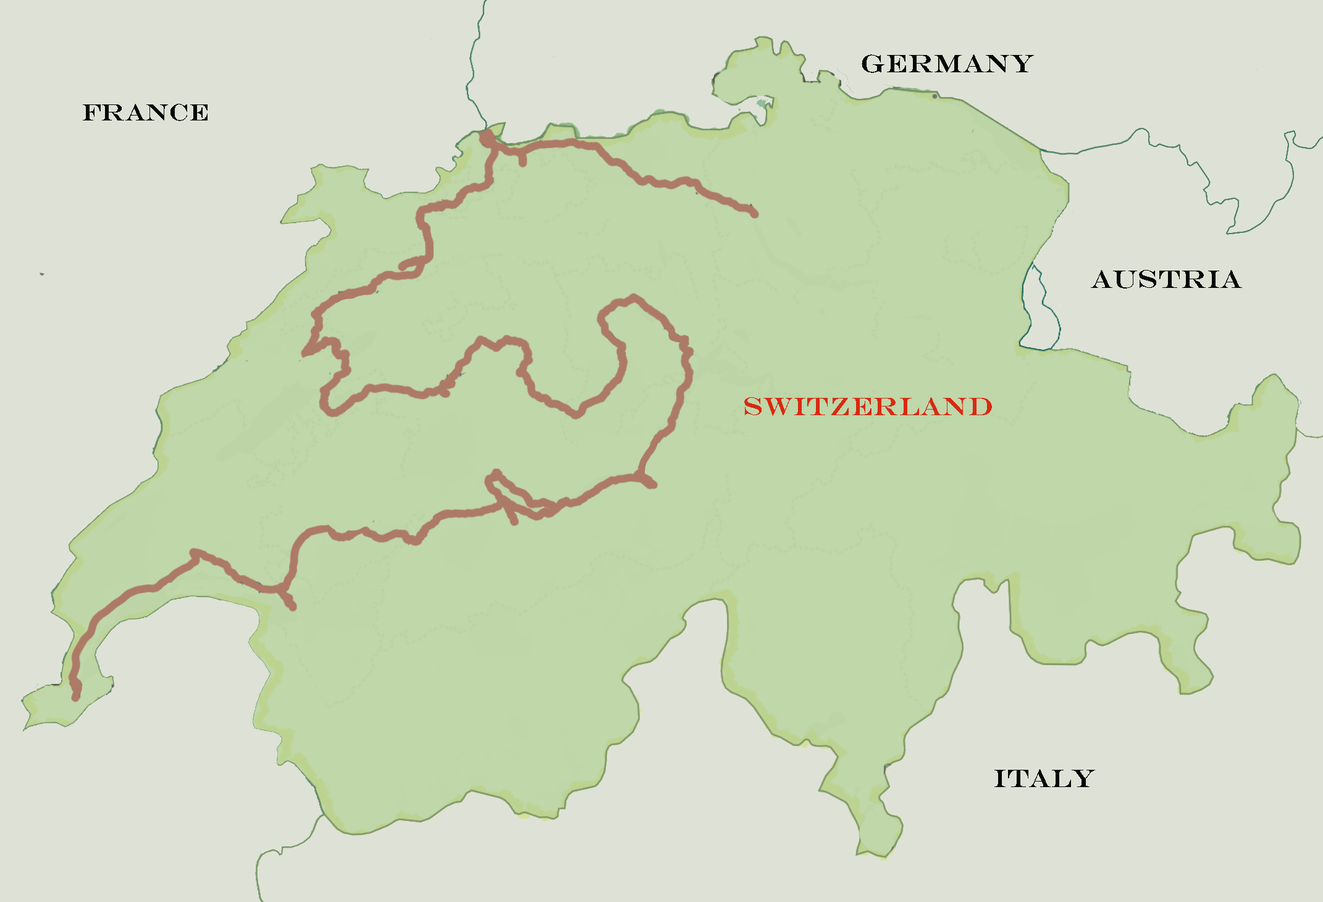
<style>
.page{position:relative;width:1323px;height:902px;background:#dee2d6}
.page>*{position:absolute;margin:0}
.t1{font:25.3px "Engry";color:#050505}
.t2{font:23.6px "Engry";color:#050505}
.t3{font:25.3px "Engry";color:#da2912}
</style>
<div class="page">
<p class="t1" style="left:861px;top:54px;width:173px;height:19px">Germany</p>
<p class="t2" style="left:82px;top:104px;width:126px;height:17px">France</p>
<p class="t1" style="left:1090px;top:270px;width:152px;height:18px">Austria</p>
<p class="t3" style="left:744px;top:397px;width:248px;height:19px">Switzerland</p>
<p class="t1" style="left:994px;top:769px;width:101px;height:18px">Italy</p>
</div>
